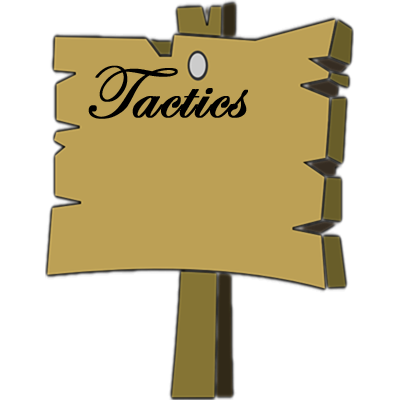
<style>
.page{position:relative;width:400px;height:400px;background:#ffffff}
.page>*{position:absolute;margin:0}
.t1{font:75px "EdwardianScriptITC";color:#000000;font-weight:bold}
</style>
<div class="page">
<p class="t1" style="left:88px;top:65px;width:160px;height:54px">Tactics</p>
</div>
